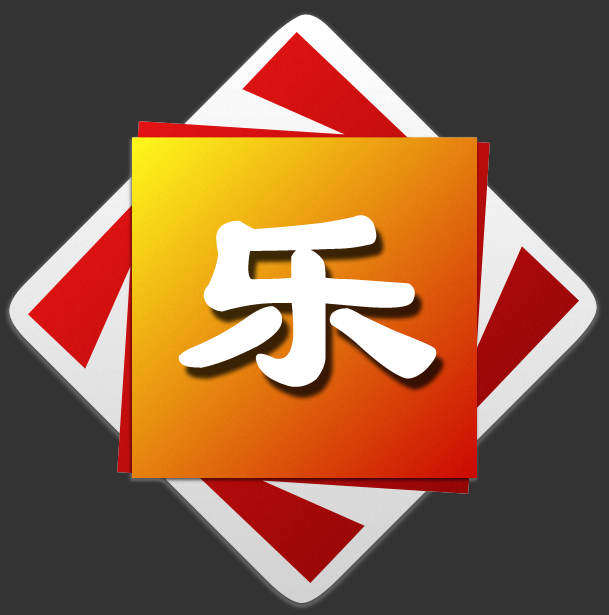
<style>
.page{position:relative;width:609px;height:615px;background:#333333}
.page>*{position:absolute;margin:0}
.t1{font:266.7px "LiSu";color:#ffffff;font-weight:bold}
</style>
<div class="page">
<p class="t1" style="left:178px;top:215px;width:259px;height:172px">乐</p>
</div>
